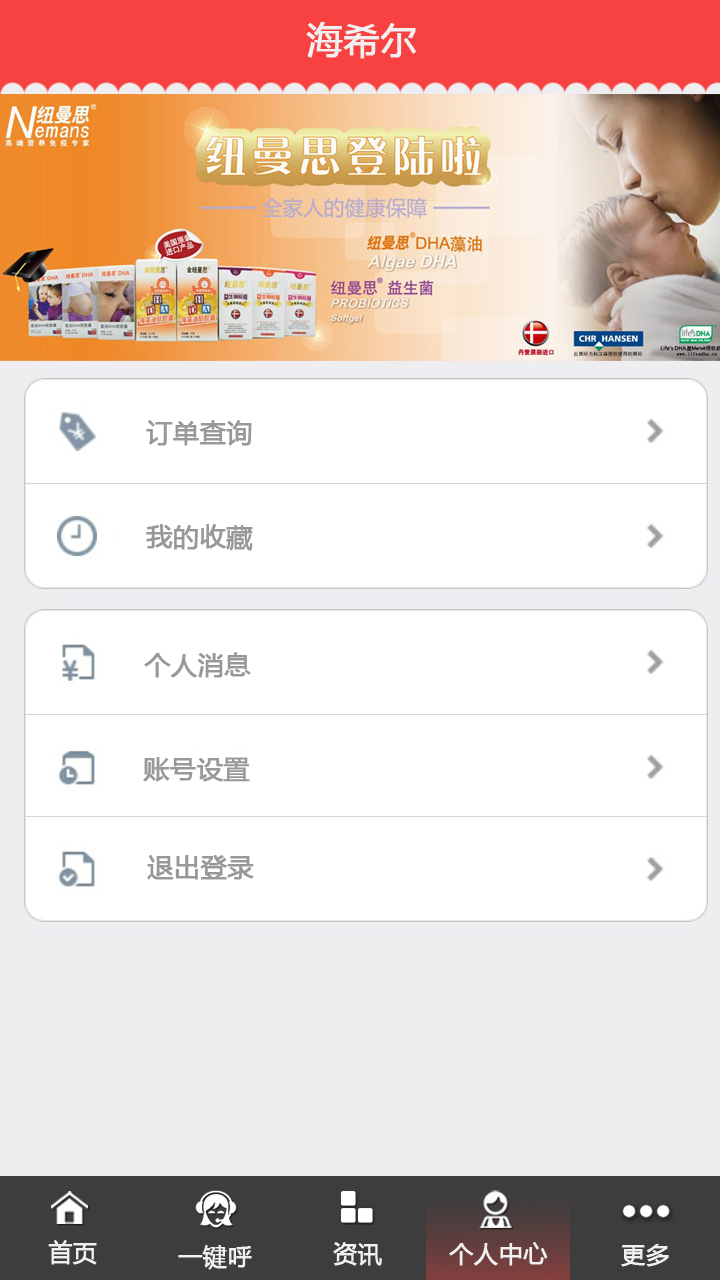
<style>
.page{position:relative;width:720px;height:1280px;background:#ffffff}
.page>*{position:absolute;margin:0}
.t1{font:36px "MicrosoftYaHei";color:#f0f0f0;font-weight:bold}
.t2{font:26px "MicrosoftYaHei";color:#999898;font-weight:bold}
.t3{font:24px "MicrosoftYaHei";color:#f0f0f0;font-weight:bold}
</style>
<div class="page">
<p class="t1" style="left:306px;top:22px;width:110px;height:37px">海希尔</p>
<p class="t2" style="left:146px;top:420px;width:106px;height:26px">订单查询</p>
<p class="t2" style="left:146px;top:524px;width:107px;height:27px">我的收藏</p>
<p class="t2" style="left:144px;top:652px;width:107px;height:26px">个人消息</p>
<p class="t2" style="left:143px;top:757px;width:107px;height:25px">账号设置</p>
<p class="t2" style="left:147px;top:855px;width:107px;height:25px">退出登录</p>
<p class="t3" style="left:48px;top:1240px;width:49px;height:25px">首页</p>
<p class="t3" style="left:178px;top:1245px;width:74px;height:25px">一键呼</p>
<p class="t3" style="left:333px;top:1242px;width:49px;height:24px">资讯</p>
<p class="t3" style="left:449px;top:1242px;width:99px;height:24px">个人中心</p>
<p class="t3" style="left:621px;top:1244px;width:48px;height:23px">更多</p>
</div>
